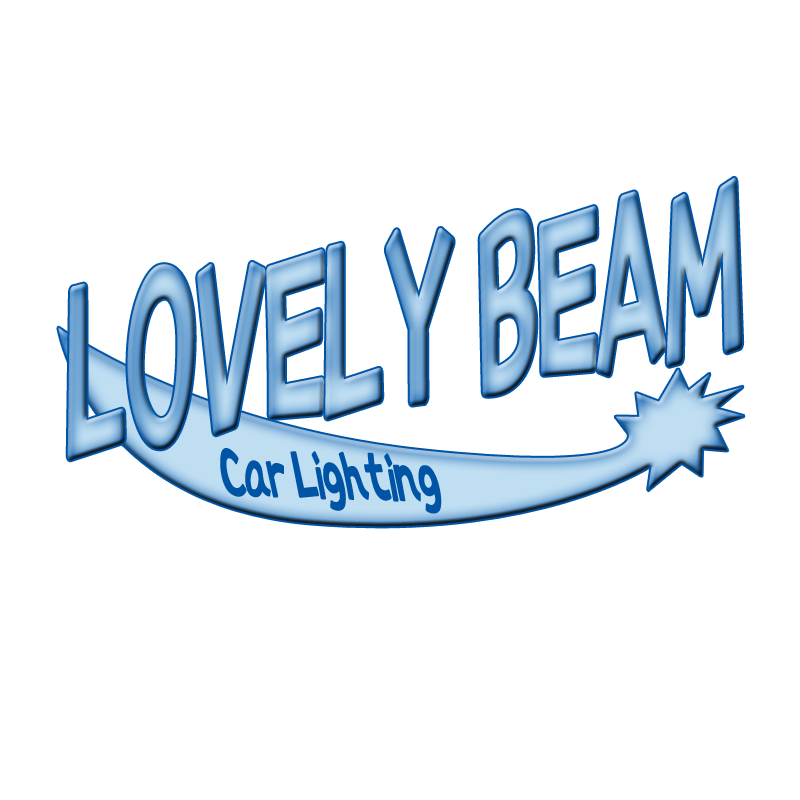
<style>
.page{position:relative;width:800px;height:800px;background:#ffffff}
.page>*{position:absolute;margin:0}
.t1{font:261.4px "AprilFoolAL";letter-spacing:-0.05em;font-weight:bold;scale:0.49 1}
.t2{font:70.7px "AprilFoolAL";letter-spacing:-0.05em;color:#0054a6;font-weight:bold;scale:0.64 1}
</style>
<div class="page">
<p class="t1" style="left:67px;top:178px;width:676px;height:283px;rotate:-9deg">LOVELY BEAM</p>
<p class="t2" style="left:220px;top:448px;width:222px;height:66px;rotate:2deg">Car Lighting</p>
</div>
